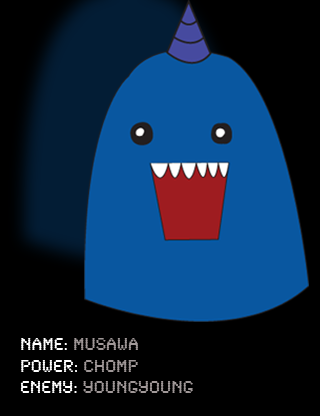
<style>
.page{position:relative;width:320px;height:416px;background:#000000}
.page>*{position:absolute;margin:0}
.t1{font:18px "SynchroLET";color:#a09898}
.t2{font:18px "SynchroLET";color:#ffffff}
</style>
<div class="page">
<p class="t1" style="left:20px;top:338px;width:173px;height:55px"><span class="t2">name:</span> musawa<br><span class="t2">Power: </span>chomp<br><span class="t2">Enemy:</span> youngyoung</p>
</div>
